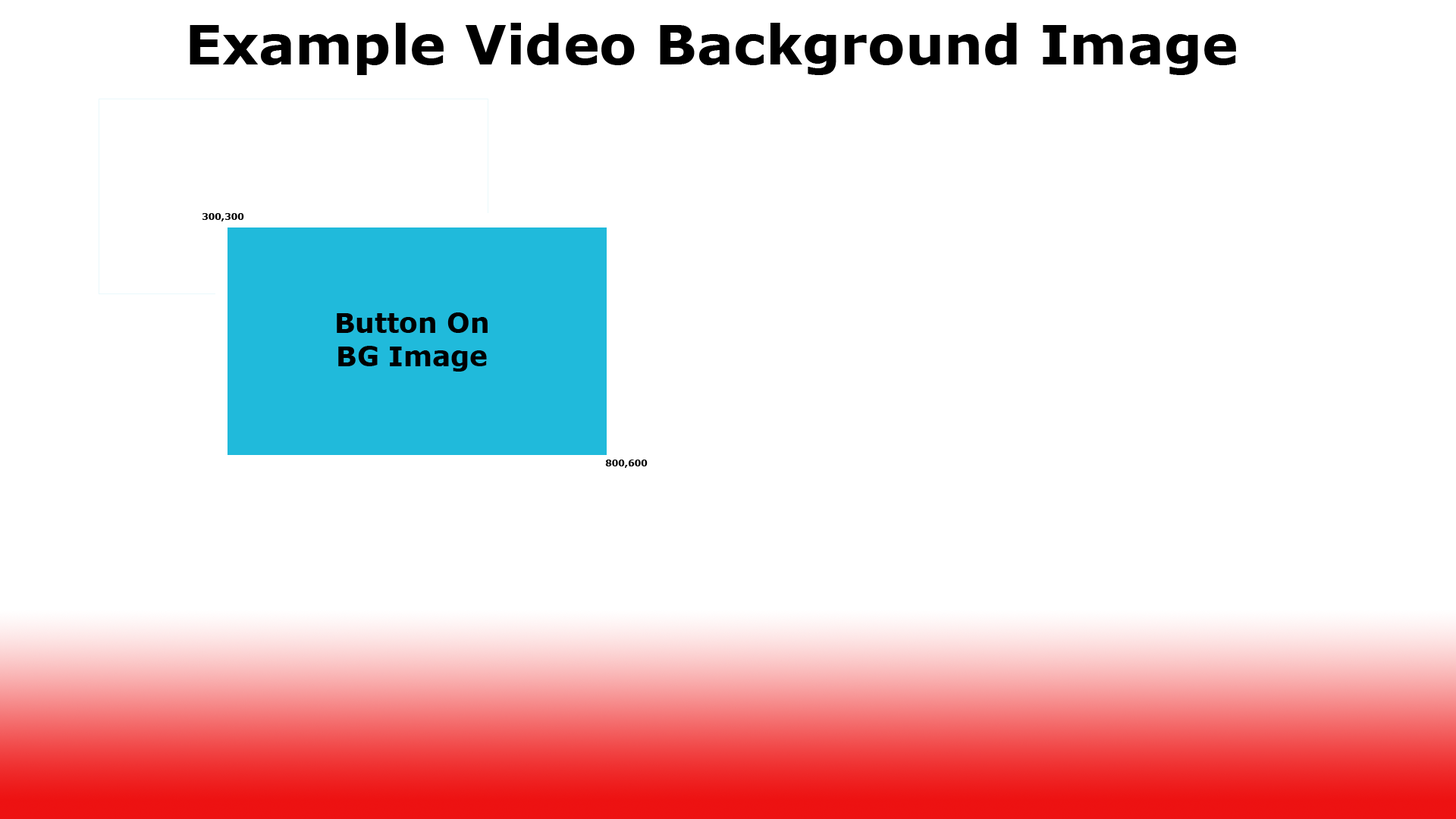
<style>
.page{position:relative;width:1456px;height:819px;background:#ffffff}
.page>*{position:absolute;margin:0}
.t1{font:54.6px "Verdana-Bold";color:#000000}
.t2{font:9.1px "Verdana-Bold";color:#000000}
.t3{font:27.3px "Verdana-Bold";color:#000000}
</style>
<div class="page">
<p class="t1" style="left:190px;top:23px;width:1046px;height:52px">Example Video Background Image</p>
<p class="t2" style="left:202px;top:213px;width:42px;height:8px">300,300</p>
<p class="t3" style="left:337px;top:312px;width:151px;height:60px;text-align:center">Button On<br>BG Image</p>
<p class="t2" style="left:605px;top:460px;width:43px;height:8px">800,600</p>
</div>
